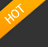
<style>
.page{position:relative;width:48px;height:47px;background:#333333}
.page>*{position:absolute;margin:0}
.t1{font:12px "TrebuchetMS";color:#ffffff}
</style>
<div class="page">
<p class="t1" style="left:4px;top:3px;width:20px;height:21px;rotate:-41deg">HOT</p>
</div>
